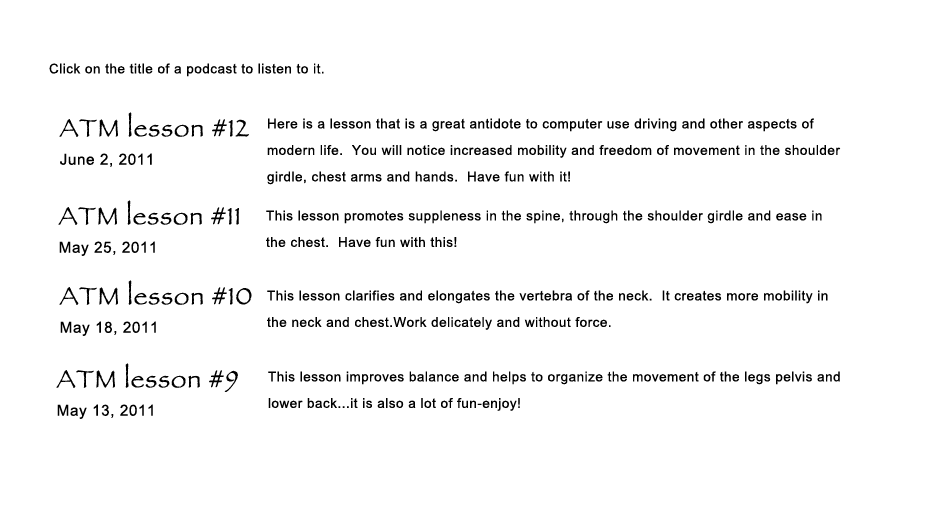
<style>
.page{position:relative;width:950px;height:523px;background:#ffffff}
.page>*{position:absolute;margin:0}
.t1{font:23px "ArialMT";letter-spacing:0.04em;color:#000000}
.t2{font:43.3px/22.8px "Papyrus";letter-spacing:0.04em;color:#000000}
.t3{font:26.1px/22.8px "ArialMT";letter-spacing:0.04em;color:#000000}
.t4{font:23px/26.5px "ArialMT";letter-spacing:0.04em;color:#000000}
</style>
<div class="page">
<p class="t1" style="left:49px;top:63px;width:275px;height:14px">Click on the title of a podcast to listen to it.</p>
<p class="t2" style="left:59px;top:112px;width:190px;height:55px">ATM lesson #12<br><span class="t3">June 2, 2011</span></p>
<p class="t4" style="left:267px;top:118px;width:574px;height:67px">Here is a lesson that is a great antidote to computer use driving and other aspects of <br>modern life.  You will notice increased mobility and freedom of movement in the shoulder <br>girdle, chest arms and hands.  Have fun with it!</p>
<p class="t2" style="left:58px;top:200px;width:181px;height:56px">ATM lesson #11<br><span class="t3">May 25, 2011</span></p>
<p class="t4" style="left:266px;top:210px;width:556px;height:37px">This lesson promotes suppleness in the spine, through the shoulder girdle and ease in <br>the chest.  Have fun with this!</p>
<p class="t2" style="left:59px;top:280px;width:193px;height:56px">ATM lesson #10<br><span class="t3">May 18, 2011</span></p>
<p class="t4" style="left:267px;top:290px;width:561px;height:40px">This lesson clarifies and elongates the vertebra of the neck.  It creates more mobility in <br>the neck and chest.Work delicately and without force.</p>
<p class="t2" style="left:56px;top:363px;width:182px;height:56px">ATM lesson #9<br><span class="t3">May 13, 2011</span></p>
<p class="t4" style="left:268px;top:371px;width:572px;height:40px">This lesson improves balance and helps to organize the movement of the legs pelvis and <br>lower back...it is also a lot of fun-enjoy!</p>
</div>
